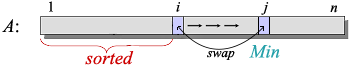
<style>
.page{position:relative;width:351px;height:66px;background:#ffffff}
.page>*{position:absolute;margin:0}
.t1{font:14.7px "TimesNewRomanPSMT";color:#000000}
.t2{font:14.7px "TimesNewRomanPS-ItalicMT";color:#000000}
.t3{font:18.7px "TimesNewRomanPS-ItalicMT";color:#000000}
.t4{font:18.7px "TimesNewRomanPSMT";color:#000000}
.t5{font:18.7px "TimesNewRomanPS-ItalicMT";color:#cd0000}
.t6{font:13.3px "TimesNewRomanPS-ItalicMT";color:#000000}
.t7{font:18.7px "TimesNewRomanPS-ItalicMT";color:#27a1aa}
</style>
<div class="page">
<p class="t1" style="left:49px;top:1px;width:4px;height:11px">1</p>
<p class="t2" style="left:176px;top:2px;width:4px;height:10px">i</p>
<p class="t2" style="left:261px;top:2px;width:8px;height:13px">j</p>
<p class="t2" style="left:330px;top:5px;width:8px;height:8px">n</p>
<p class="t3" style="left:2px;top:19px;width:17px;height:14px">A<span class="t4">:</span></p>
<p class="t5" style="left:85px;top:51px;width:49px;height:14px">sorted</p>
<p class="t6" style="left:207px;top:51px;width:28px;height:9px">swap</p>
<p class="t7" style="left:249px;top:45px;width:31px;height:13px">Min</p>
</div>
